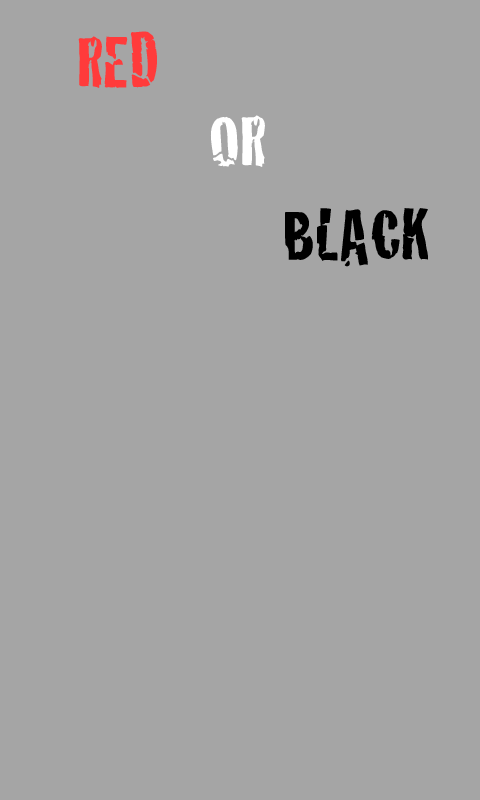
<style>
.page{position:relative;width:480px;height:800px;background:#a5a5a5}
.page>*{position:absolute;margin:0}
.t1{font:75px "Cracked";color:#ff3b3b}
.t2{font:75px "Cracked";color:#ffffff}
.t3{font:75px "Cracked";color:#000000}
</style>
<div class="page">
<p class="t1" style="left:78px;top:31px;width:79px;height:57px">RED</p>
<p class="t2" style="left:210px;top:115px;width:55px;height:52px">OR</p>
<p class="t3" style="left:285px;top:208px;width:143px;height:59px">BLACK</p>
</div>
